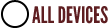
<style>
.page{position:relative;width:110px;height:28px;background:#ffffff}
.page>*{position:absolute;margin:0}
.t1{font:22.8px "LeagueGothic";color:#5e1e21}
</style>
<div class="page">
<p class="t1" style="left:32px;top:6px;width:76px;height:18px">ALL DEVICES</p>
</div>
